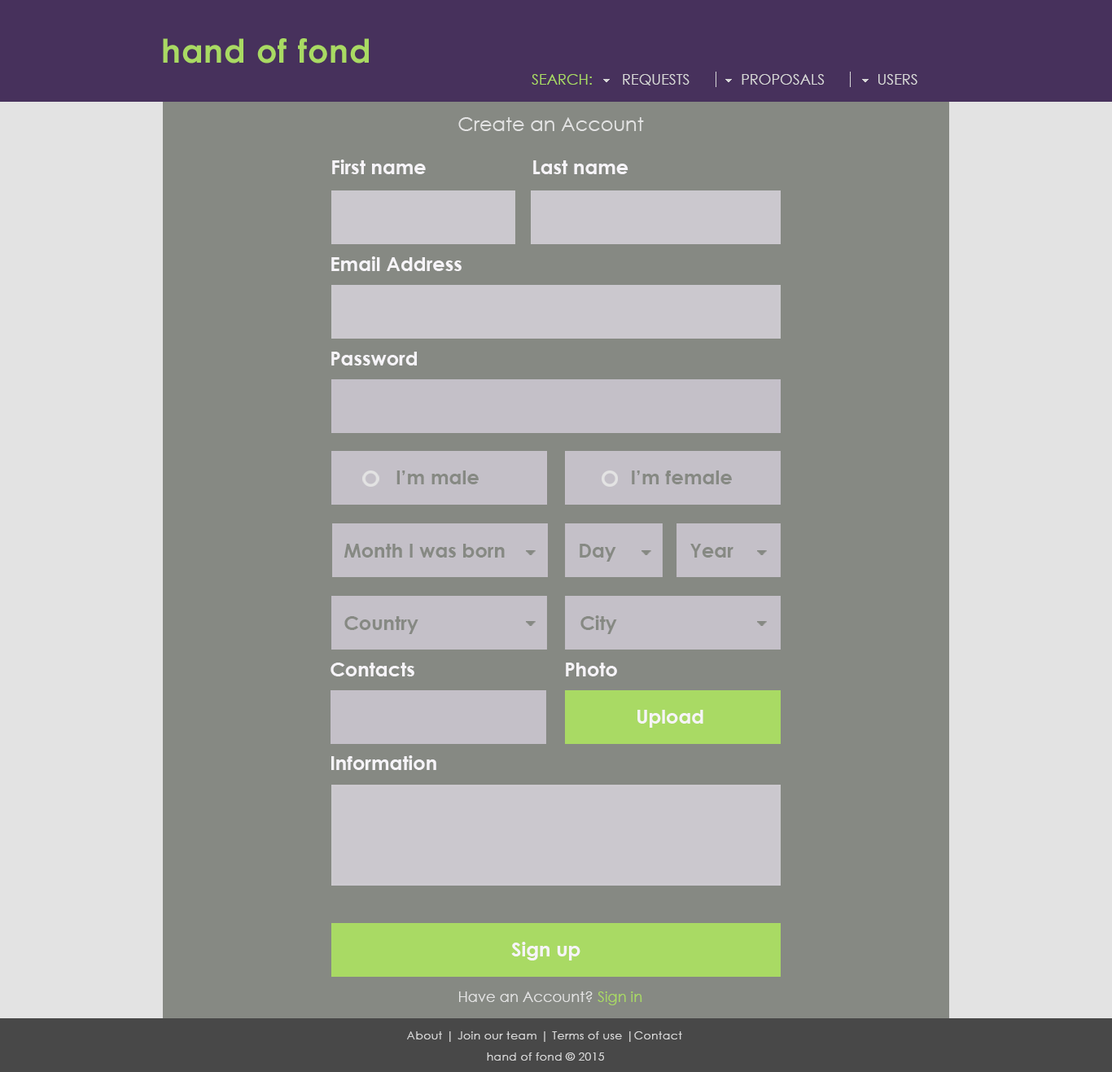
<style>
.page{position:relative;width:1112px;height:1072px;background:#868983}
.page>*{position:absolute;margin:0}
.t1{font:14.7px "CenturyGothic";color:#a9da63}
.t2{font:14.7px "CenturyGothic";color:#d7d7d7}
.t3{font:19.5px "CenturyGothic";color:#e3e3e3}
.t4{font:19.5px "CenturyGothic-Bold";color:#f6f4f8}
.t5{font:19.5px "CenturyGothic-Bold";color:#868983}
.t6{font:14.7px "CenturyGothic";color:#e3e3e3}
.t7{font:11.4px "CenturyGothic";letter-spacing:0.025em;color:#d7d7d7}
</style>
<div class="page">
<p class="t1" style="left:532px;top:74px;width:60px;height:11px">SEARCH:</p>
<p class="t2" style="left:623px;top:74px;width:67px;height:11px">REQUESTS</p>
<p class="t2" style="left:742px;top:74px;width:83px;height:11px">PROPOSALS</p>
<p class="t2" style="left:878px;top:74px;width:40px;height:11px">USERS</p>
<p class="t3" style="left:458px;top:117px;width:186px;height:14px">Create an Account</p>
<p class="t4" style="left:332px;top:160px;width:94px;height:14px">First name</p>
<p class="t4" style="left:533px;top:160px;width:96px;height:14px">Last name</p>
<p class="t4" style="left:331px;top:256px;width:131px;height:15px">Email Address</p>
<p class="t4" style="left:331px;top:352px;width:86px;height:14px">Password</p>
<p class="t5" style="left:396px;top:471px;width:83px;height:13px">I’m male</p>
<p class="t5" style="left:632px;top:471px;width:100px;height:13px">I’m female</p>
<p class="t5" style="left:344px;top:544px;width:161px;height:14px">Month I was born</p>
<p class="t5" style="left:580px;top:544px;width:36px;height:18px">Day</p>
<p class="t5" style="left:690px;top:544px;width:44px;height:14px">Year</p>
<p class="t5" style="left:344px;top:616px;width:74px;height:18px">Country</p>
<p class="t5" style="left:580px;top:615px;width:37px;height:19px">City</p>
<p class="t4" style="left:331px;top:663px;width:83px;height:14px">Contacts</p>
<p class="t4" style="left:566px;top:663px;width:51px;height:14px">Photo</p>
<p class="t4" style="left:637px;top:710px;width:66px;height:18px">Upload</p>
<p class="t4" style="left:331px;top:756px;width:105px;height:14px">Information</p>
<p class="t4" style="left:511px;top:942px;width:69px;height:19px">Sign up</p>
<p class="t6" style="left:459px;top:992px;width:183px;height:13px">Have an Account? <span class="t1">Sign in</span></p>
<p class="t7" style="left:407px;top:1032px;width:275px;height:10px">About | Join our team | Terms of use |Contact</p>
<p class="t7" style="left:487px;top:1053px;width:117px;height:8px">hand of fond © 2015</p>
</div>
